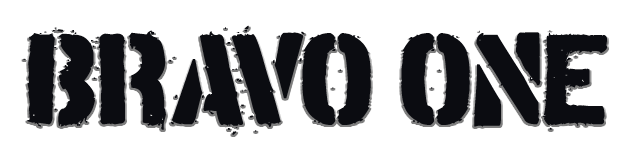
<style>
.page{position:relative;width:638px;height:156px;background:#ffffff}
.page>*{position:absolute;margin:0}
.t1{font:128px "TudorVictors";color:#0b0c11}
</style>
<div class="page">
<p class="t1" style="left:23px;top:25px;width:584px;height:110px">BRAVO ONE</p>
</div>
